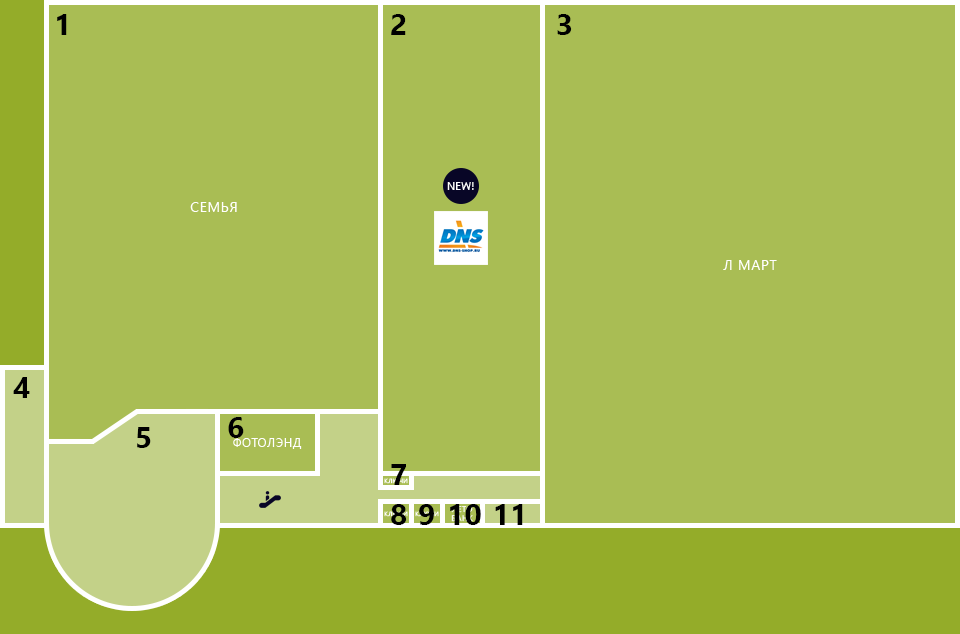
<style>
.page{position:relative;width:960px;height:634px;background:#a9bd54}
.page>*{position:absolute;margin:0}
.t1{font:30px "SegoeUI-Bold";color:#000000}
</style>
<div class="page">
<p class="t1" style="left:57px;top:14px;width:10px;height:21px">1</p>
<p class="t1" style="left:391px;top:14px;width:15px;height:21px">2</p>
<p class="t1" style="left:557px;top:14px;width:15px;height:21px">3</p>
<p class="t1" style="left:13px;top:377px;width:17px;height:21px">4</p>
<p class="t1" style="left:228px;top:417px;width:16px;height:21px">6</p>
<p class="t1" style="left:137px;top:427px;width:14px;height:21px">5</p>
<p class="t1" style="left:391px;top:464px;width:15px;height:21px">7</p>
<p class="t1" style="left:391px;top:504px;width:16px;height:21px">8</p>
<p class="t1" style="left:419px;top:504px;width:15px;height:21px">9</p>
<p class="t1" style="left:450px;top:504px;width:31px;height:21px">10</p>
<p class="t1" style="left:495px;top:504px;width:28px;height:21px">11</p>
</div>
